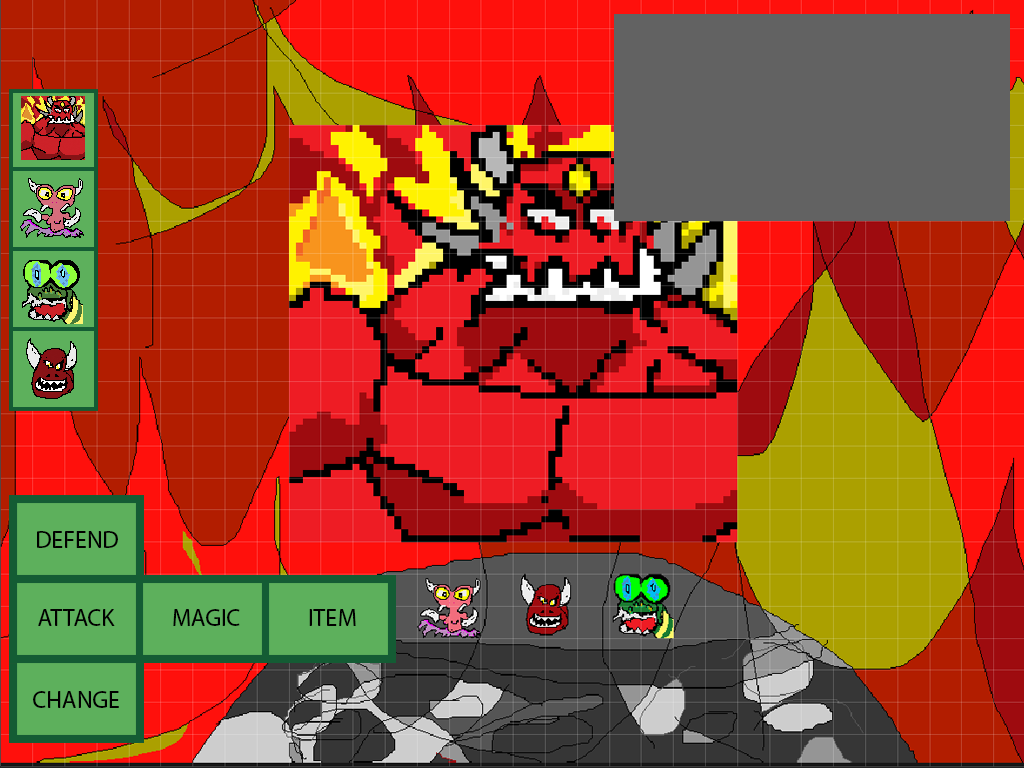
<style>
.page{position:relative;width:1024px;height:768px}
.page>*{position:absolute;margin:0}
.t1{font:24px "MyriadPro-Regular";color:#000000}
</style>
<div class="page">
<p class="t1" style="left:37px;top:531px;width:81px;height:17px">DEFEND</p>
<p class="t1" style="left:38px;top:609px;width:77px;height:17px">ATTACK</p>
<p class="t1" style="left:173px;top:609px;width:67px;height:17px">MAGIC</p>
<p class="t1" style="left:309px;top:609px;width:47px;height:17px">ITEM</p>
<p class="t1" style="left:33px;top:691px;width:86px;height:17px">CHANGE</p>
</div>
